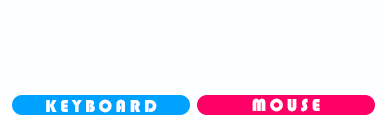
<style>
.page{position:relative;width:386px;height:140px;background:#fcfeff}
.page>*{position:absolute;margin:0}
.t1{font:18px "Bauhaus93";letter-spacing:0.2em;color:#ffffff}
</style>
<div class="page">
<p class="t1" style="left:46px;top:99px;width:111px;height:14px">KEYBOARD</p>
<p class="t1" style="left:252px;top:98px;width:68px;height:14px">MOUSE</p>
</div>
